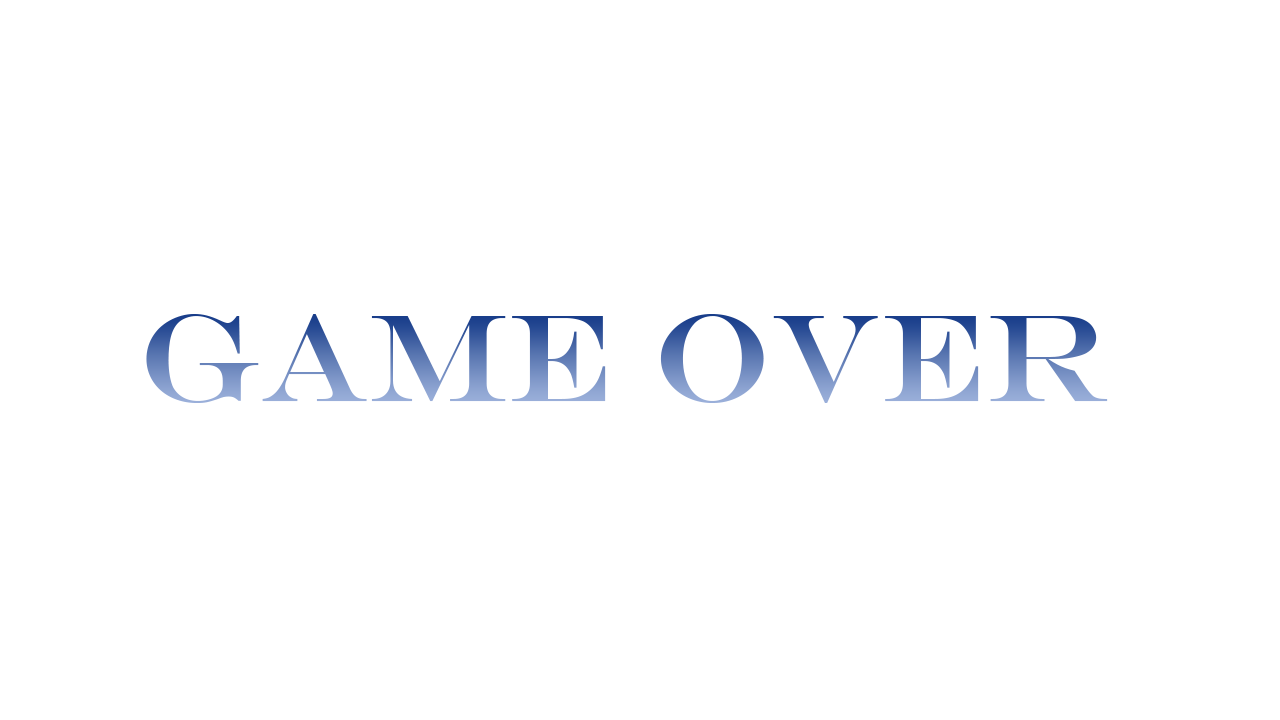
<style>
.page{position:relative;width:1280px;height:720px;background:#ffffff}
.page>*{position:absolute;margin:0}
.t1{font:125px "EngraversMT"}
</style>
<div class="page">
<p class="t1" style="left:146px;top:314px;width:962px;height:89px">GAME OVER</p>
</div>
